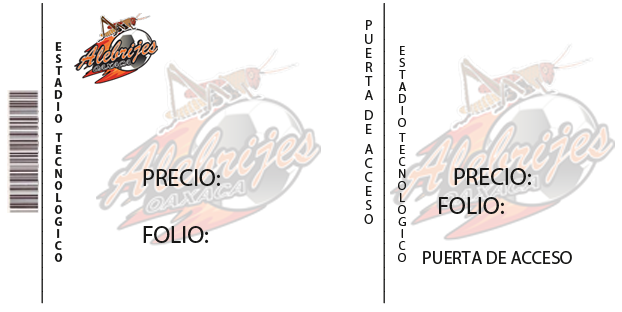
<style>
.page{position:relative;width:622px;height:312px;background:#ffffff}
.page>*{position:absolute;margin:0}
.t1{font:12px "MyriadPro-Bold";color:#161615}
.t2{font:14px "MyriadPro-Regular";color:#161615}
.t3{font:12px "MyriadPro-Regular";color:#161615}
.t4{font:24px "MyriadPro-Regular";color:#161615}
.t5{font:18px "MyriadPro-Regular";color:#161615}
</style>
<div class="page">
<p class="t1" style="left:41px;top:3px;width:2px;height:301px;text-align:right">|||||||||||||||||||||||||</p>
<p class="t1" style="left:383px;top:3px;width:2px;height:301px;text-align:right">|||||||||||||||||||||||||</p>
<p class="t2" style="left:364px;top:20px;width:9px;height:204px">PUERTA  DE  ACCESO</p>
<p class="t1" style="left:54px;top:42px;width:9px;height:220px;text-align:right">ESTADIO   TECNOLOGICO</p>
<p class="t3" style="left:398px;top:46px;width:8px;height:216px;text-align:center">ESTADIO TECNOLOGICO</p>
<p class="t4" style="left:143px;top:169px;width:77px;height:74px">PRECIO:<br><br>FOLIO:</p>
<p class="t4" style="left:423px;top:168px;width:149px;height:96px">PRECIO:                 <br>      FOLIO:<br><br><span class="t5">    PUERTA DE ACCESO</span></p>
</div>
